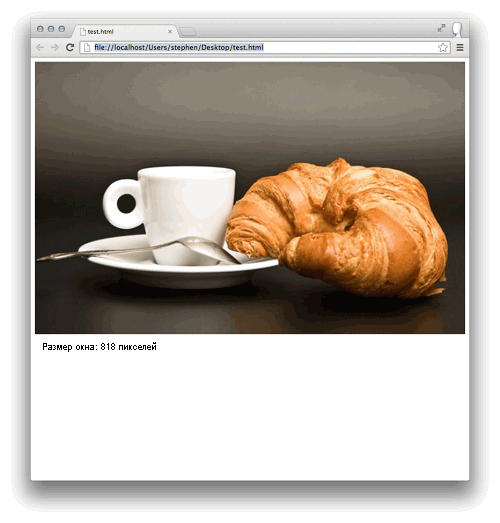
<style>
.page{position:relative;width:500px;height:523px;background:#ffffff}
.page>*{position:absolute;margin:0}
.t1{font:9px "ArialMT";color:#000000}
</style>
<div class="page">
<p class="t1" style="left:43px;top:342px;width:113px;height:10px">Размер окна: 818 пикселей</p>
</div>
